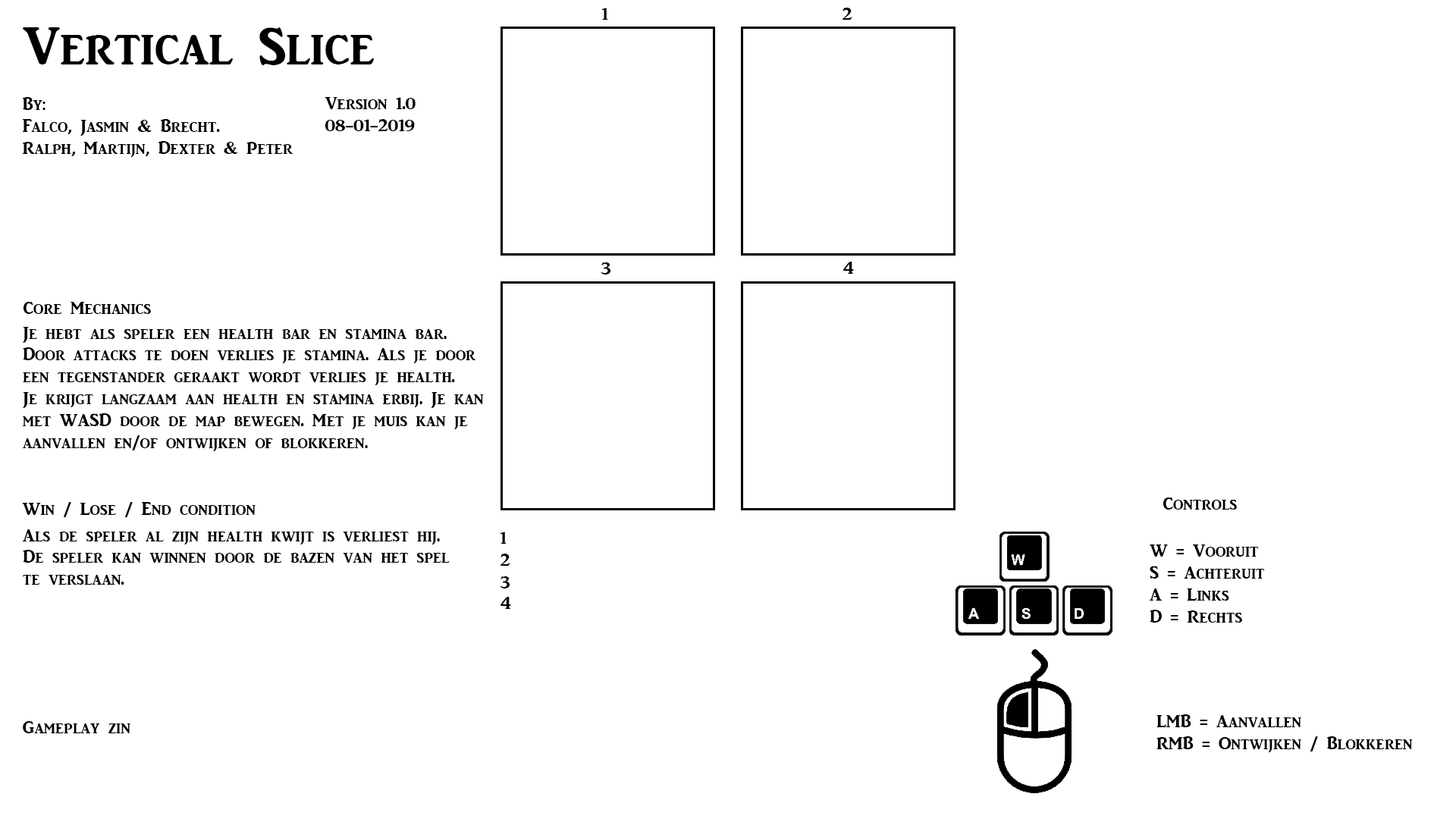
<style>
.page{position:relative;width:1456px;height:819px;background:#ffffff}
.page>*{position:absolute;margin:0}
.t1{font:18.2px "ARJULIAN";color:#000000}
.t2{font:54.6px "ARJULIAN";color:#000000}
</style>
<div class="page">
<p class="t1" style="left:602px;top:8px;width:6px;height:12px">1</p>
<p class="t1" style="left:842px;top:8px;width:10px;height:12px">2</p>
<p class="t2" style="left:23px;top:27px;width:351px;height:38px">Vertical Slice</p>
<p class="t1" style="left:22px;top:97px;width:271px;height:60px">By:<br>Falco, Jasmin &amp; Brecht.<br>Ralph, Martijn, Dexter &amp; Peter</p>
<p class="t1" style="left:325px;top:97px;width:91px;height:34px">Version 1.0<br>08-01-2019</p>
<p class="t1" style="left:601px;top:262px;width:9px;height:13px">3</p>
<p class="t1" style="left:842px;top:262px;width:12px;height:12px">4</p>
<p class="t1" style="left:23px;top:302px;width:128px;height:12px">Core Mechanics</p>
<p class="t1" style="left:23px;top:327px;width:461px;height:124px">Je hebt als speler een health bar en stamina bar. <br>Door attacks te doen verlies je stamina. Als je door<br>een tegenstander geraakt wordt verlies je health.<br>Je krijgt langzaam aan health en stamina erbij. Je kan <br>met WASD door de map bewegen. Met je muis kan je <br>aanvallen en/of ontwijken of blokkeren.</p>
<p class="t1" style="left:1163px;top:497px;width:74px;height:13px">Controls</p>
<p class="t1" style="left:22px;top:502px;width:234px;height:15px">Win / Lose / End condition</p>
<p class="t1" style="left:23px;top:529px;width:427px;height:56px">Als de speler al zijn health kwijt is verliest hij. <br>De speler kan winnen door de bazen van het spel<br>te verslaan.</p>
<p class="t1" style="left:500px;top:532px;width:11px;height:77px">1<br>2<br>3<br>4</p>
<p class="t1" style="left:1150px;top:544px;width:115px;height:79px">W = Vooruit<br>S = Achteruit<br>A = Links<br>D = Rechts</p>
<p class="t1" style="left:23px;top:721px;width:107px;height:12px">Gameplay zin</p>
<p class="t1" style="left:1156px;top:714px;width:257px;height:38px">LMB = Aanvallen<br>RMB = Ontwijken / Blokkeren</p>
</div>
